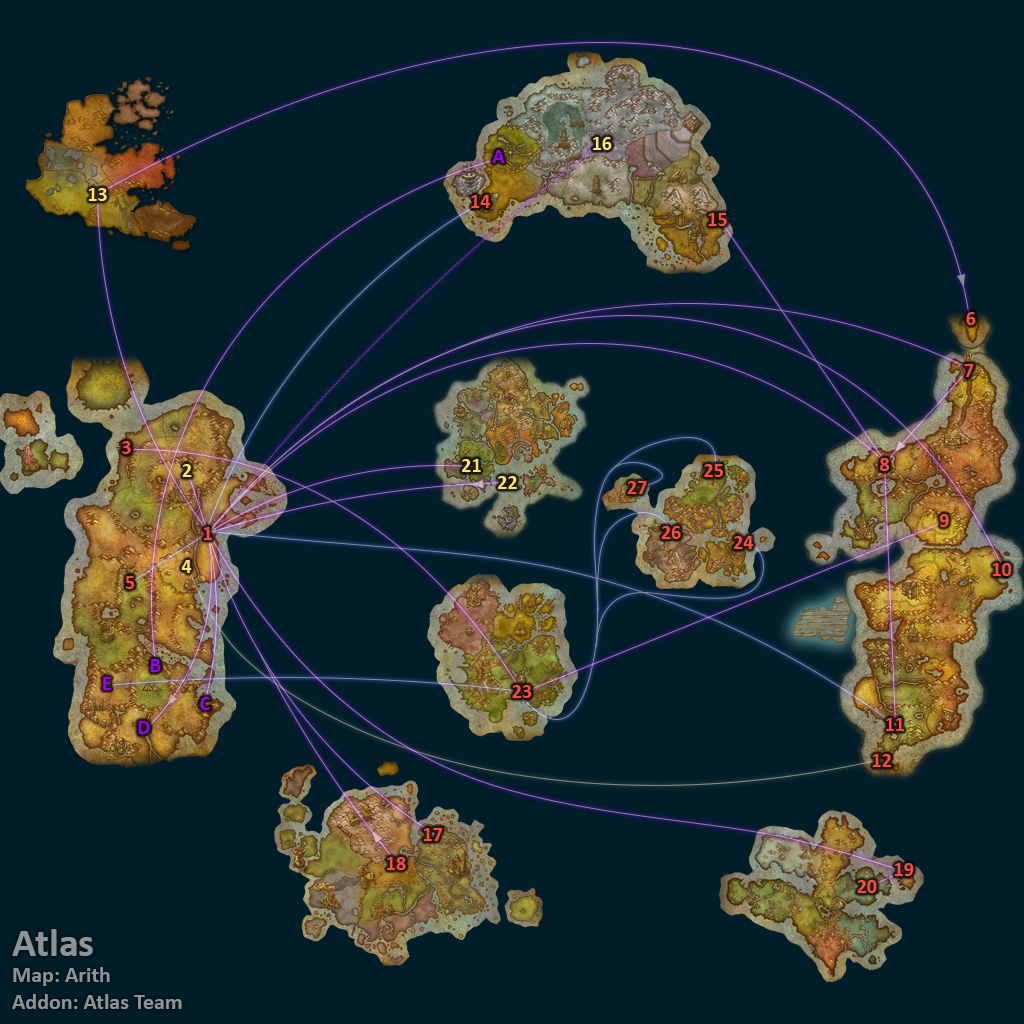
<style>
.page{position:relative;width:1024px;height:1024px;background:#001d29}
.page>*{position:absolute;margin:0}
.t1{font:20px "Calibri-Bold";color:#fee570}
.t2{font:20px "Calibri-Bold";color:#9900ff}
.t3{font:20px "Calibri-Bold";color:#ff4c3c}
.t4{font:22px "Calibri-Bold";color:#8d9397}
.t5{font:40px "Calibri-Bold";color:#8d9397}
</style>
<div class="page">
<p class="t1" style="left:593px;top:137px;width:19px;height:13px">16</p>
<p class="t2" style="left:492px;top:150px;width:13px;height:13px">A</p>
<p class="t1" style="left:89px;top:188px;width:18px;height:13px">13</p>
<p class="t3" style="left:471px;top:195px;width:19px;height:13px">14</p>
<p class="t3" style="left:708px;top:213px;width:19px;height:13px">15</p>
<p class="t3" style="left:966px;top:312px;width:10px;height:13px">6</p>
<p class="t3" style="left:964px;top:364px;width:10px;height:13px">7</p>
<p class="t3" style="left:122px;top:441px;width:9px;height:13px">3</p>
<p class="t1" style="left:462px;top:459px;width:19px;height:13px">21</p>
<p class="t3" style="left:880px;top:458px;width:9px;height:13px">8</p>
<p class="t1" style="left:182px;top:464px;width:10px;height:13px">2</p>
<p class="t3" style="left:704px;top:464px;width:19px;height:13px">25</p>
<p class="t1" style="left:498px;top:476px;width:19px;height:13px">22</p>
<p class="t3" style="left:627px;top:481px;width:20px;height:13px">27</p>
<p class="t3" style="left:939px;top:514px;width:10px;height:13px">9</p>
<p class="t3" style="left:204px;top:527px;width:8px;height:13px">1</p>
<p class="t3" style="left:661px;top:526px;width:20px;height:13px">26</p>
<p class="t3" style="left:734px;top:536px;width:19px;height:13px">24</p>
<p class="t1" style="left:181px;top:560px;width:11px;height:13px">4</p>
<p class="t3" style="left:993px;top:563px;width:18px;height:13px">10</p>
<p class="t3" style="left:125px;top:576px;width:10px;height:13px">5</p>
<p class="t2" style="left:151px;top:659px;width:10px;height:13px">B</p>
<p class="t2" style="left:103px;top:677px;width:8px;height:13px">E</p>
<p class="t3" style="left:512px;top:685px;width:20px;height:13px">23</p>
<p class="t2" style="left:200px;top:697px;width:10px;height:13px">C</p>
<p class="t2" style="left:138px;top:721px;width:12px;height:13px">D</p>
<p class="t3" style="left:886px;top:718px;width:18px;height:13px">11</p>
<p class="t3" style="left:873px;top:754px;width:19px;height:13px">12</p>
<p class="t3" style="left:424px;top:828px;width:18px;height:13px">17</p>
<p class="t3" style="left:387px;top:857px;width:19px;height:13px">18</p>
<p class="t3" style="left:895px;top:863px;width:19px;height:13px">19</p>
<p class="t3" style="left:857px;top:880px;width:20px;height:13px">20</p>
<p class="t4" style="left:12px;top:929px;width:170px;height:80px"><span class="t5">Atlas<br></span>Map: Arith<br>Addon: Atlas Team</p>
</div>
